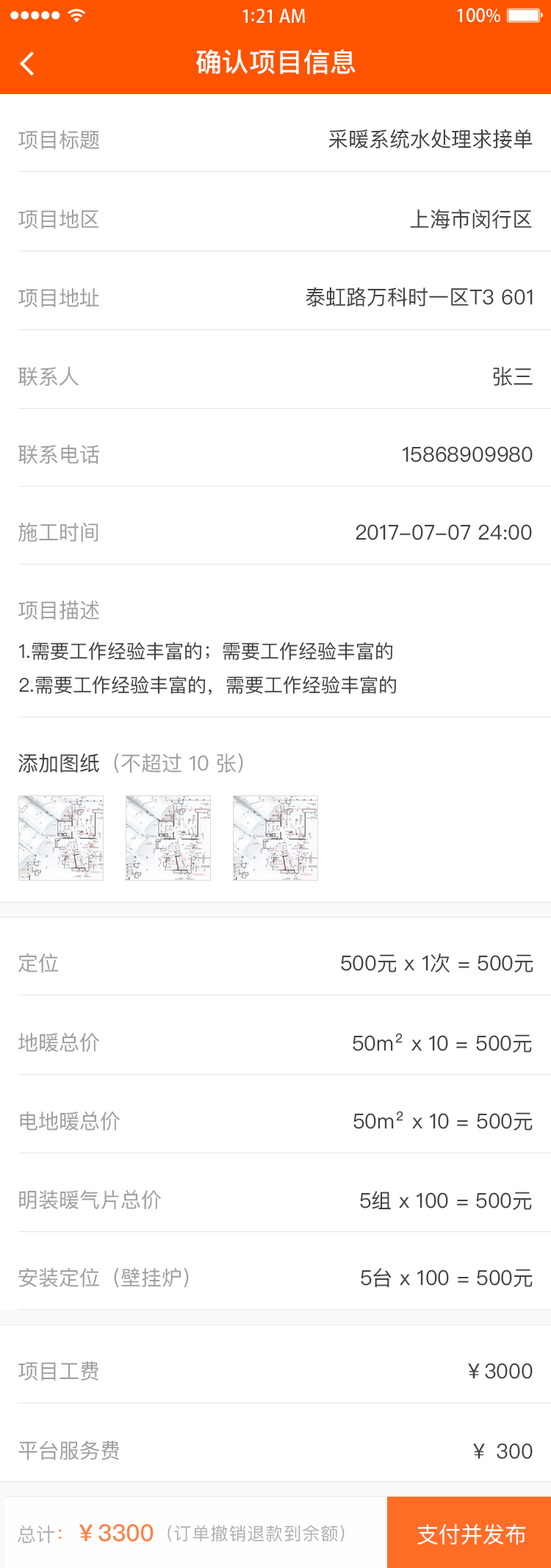
<style>
.page{position:relative;width:551px;height:1568px;background:#ffffff}
.page>*{position:absolute;margin:0}
.t1{font:26.5px "PingFangSC-Medium";letter-spacing:0.02em;color:#ffffff}
.t2{font:20.6px "PingFangSC-Regular";color:#a0a0a0}
.t3{font:20.6px "PingFangSC-Regular";color:#434343}
.t4{font:19.1px/36.8px "PingFangSC-Regular";color:#434343}
.t5{font:23.5px "PingFangSC-Medium";color:#fd8245;text-transform:uppercase}
.t6{font:19.1px "PingFangSC-Regular";color:#fd8245;text-transform:uppercase}
.t7{font:17.6px "PingFangSC-Regular";letter-spacing:0.04em;color:#a0a0a0;text-transform:uppercase}
.t8{font:22.1px "PingFangSC-Regular";color:#ffffff}
</style>
<div class="page">
<p class="t1" style="left:196px;top:49px;width:160px;height:25px">确认项目信息</p>
<p class="t2" style="left:18px;top:130px;width:81px;height:19px">项目标题</p>
<p class="t3" style="left:329px;top:129px;width:204px;height:19px">采暖系统水处理求接单</p>
<p class="t2" style="left:18px;top:210px;width:81px;height:19px">项目地区</p>
<p class="t3" style="left:410px;top:209px;width:122px;height:20px">上海市闵行区</p>
<p class="t2" style="left:18px;top:288px;width:81px;height:19px">项目地址</p>
<p class="t3" style="left:306px;top:287px;width:227px;height:20px">泰虹路万科时一区T3 601</p>
<p class="t2" style="left:18px;top:367px;width:61px;height:20px">联系人</p>
<p class="t3" style="left:493px;top:367px;width:40px;height:19px">张三</p>
<p class="t2" style="left:18px;top:445px;width:82px;height:20px">联系电话</p>
<p class="t3" style="left:403px;top:446px;width:130px;height:16px">15868909980</p>
<p class="t2" style="left:18px;top:522px;width:81px;height:20px">施工时间</p>
<p class="t3" style="left:356px;top:524px;width:176px;height:16px">2017-07-07 24:00</p>
<p class="t2" style="left:18px;top:601px;width:81px;height:19px">项目描述</p>
<p class="t4" style="left:19px;top:642px;width:378px;height:53px">1.需要工作经验丰富的；需要工作经验丰富的<br>2.需要工作经验丰富的，需要工作经验丰富的</p>
<p class="t2" style="left:18px;top:753px;width:225px;height:20px"><span class="t3">添加图纸</span>（不超过 10 张）</p>
<p class="t2" style="left:18px;top:953px;width:40px;height:20px">定位</p>
<p class="t3" style="left:341px;top:953px;width:193px;height:20px">500元 x 1次 = 500元</p>
<p class="t2" style="left:18px;top:1032px;width:81px;height:20px">地暖总价</p>
<p class="t3" style="left:353px;top:1033px;width:179px;height:20px">50m² x 10 = 500元</p>
<p class="t2" style="left:20px;top:1111px;width:100px;height:20px">电地暖总价</p>
<p class="t3" style="left:354px;top:1111px;width:179px;height:20px">50m² x 10 = 500元</p>
<p class="t2" style="left:19px;top:1189px;width:142px;height:20px">明装暖气片总价</p>
<p class="t3" style="left:360px;top:1191px;width:172px;height:19px">5组 x 100 = 500元</p>
<p class="t2" style="left:18px;top:1267px;width:171px;height:21px">安装定位（壁挂炉）</p>
<p class="t3" style="left:361px;top:1268px;width:172px;height:19px">5台 x 100 = 500元</p>
<p class="t2" style="left:18px;top:1361px;width:81px;height:20px">项目工费</p>
<p class="t3" style="left:468px;top:1363px;width:65px;height:16px">￥3000</p>
<p class="t2" style="left:18px;top:1441px;width:101px;height:19px">平台服务费</p>
<p class="t3" style="left:473px;top:1443px;width:60px;height:16px">￥ 300</p>
<p class="t5" style="left:18px;top:1524px;width:136px;height:20px"><span class="t6">总计</span><span class="t6">：</span>￥3300</p>
<p class="t7" style="left:168px;top:1525px;width:177px;height:17px">（订单撤销退款到余额）</p>
<p class="t8" style="left:418px;top:1524px;width:108px;height:21px">支付并发布</p>
</div>
